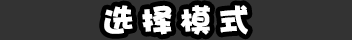
<style>
.page{position:relative;width:352px;height:40px;background:#333333}
.page>*{position:absolute;margin:0}
.t1{font:32px "DFPHaiBaoW12";letter-spacing:0.2em;color:#ffffff}
</style>
<div class="page">
<p class="t1" style="left:104px;top:5px;width:144px;height:30px">选择模式</p>
</div>
